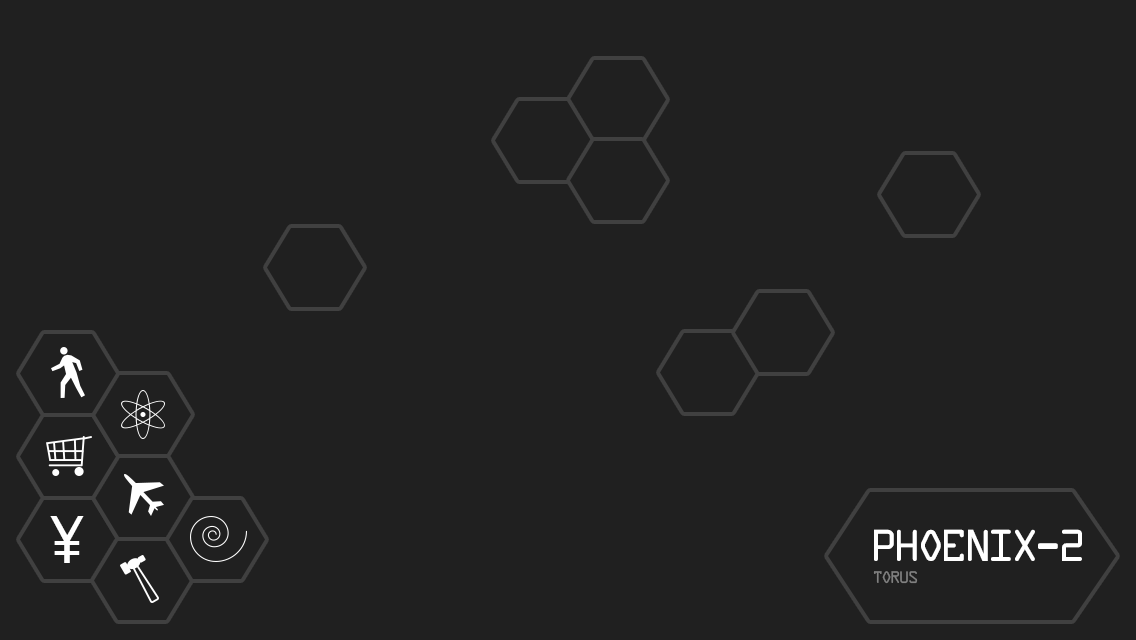
<style>
.page{position:relative;width:1136px;height:640px;background:#202020}
.page>*{position:absolute;margin:0}
.t1{font:60px "Monaco";color:#ffffff}
.t2{font:48px "DataControl";color:#ffffff}
.t3{font:18px "DataControl";color:#808080}
</style>
<div class="page">
<p class="t1" style="left:50px;top:516px;width:34px;height:47px">¥</p>
<p class="t2" style="left:874px;top:529px;width:208px;height:32px">PHoenix-2</p>
<p class="t3" style="left:873px;top:571px;width:45px;height:13px">torus</p>
</div>
